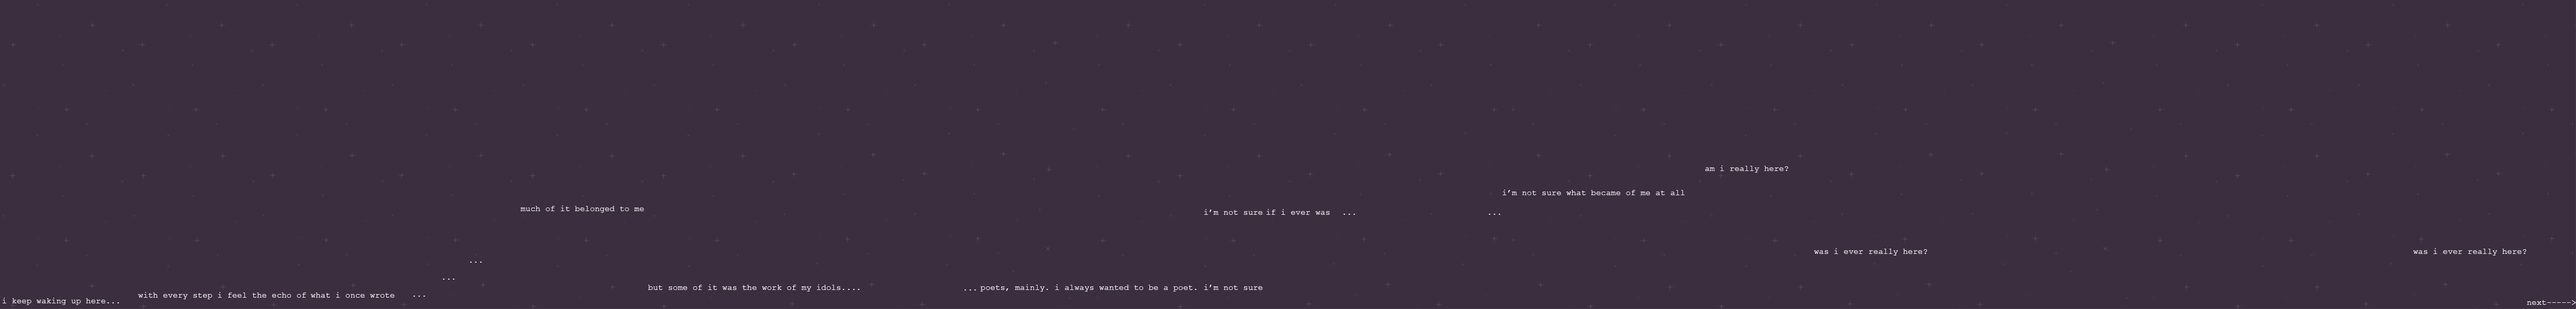
<style>
.page{position:relative;width:2576px;height:309px;background:#3a2e3f}
.page>*{position:absolute;margin:0}
.t1{font:8.2px "CourierNewPSMT";color:#ffffff}
</style>
<div class="page">
<p class="t1" style="left:1705px;top:165px;width:83px;height:8px">am i really here?</p>
<p class="t1" style="left:1502px;top:190px;width:183px;height:5px">i’m not sure what became of me at all</p>
<p class="t1" style="left:520px;top:206px;width:124px;height:7px">much of it belonged to me</p>
<p class="t1" style="left:1204px;top:209px;width:59px;height:6px">i’m not sure</p>
<p class="t1" style="left:1266px;top:209px;width:64px;height:6px">if i ever was</p>
<p class="t1" style="left:1344px;top:214px;width:11px;height:1px">...</p>
<p class="t1" style="left:1489px;top:214px;width:11px;height:1px">...</p>
<p class="t1" style="left:1814px;top:248px;width:113px;height:8px">was i ever really here?</p>
<p class="t1" style="left:2413px;top:248px;width:114px;height:8px">was i ever really here?</p>
<p class="t1" style="left:470px;top:262px;width:12px;height:1px">...</p>
<p class="t1" style="left:443px;top:279px;width:11px;height:1px">...</p>
<p class="t1" style="left:138px;top:292px;width:168px;height:7px">with every step i feel the echo of</p>
<p class="t1" style="left:311px;top:292px;width:84px;height:6px">what i once wrote</p>
<p class="t1" style="left:648px;top:284px;width:196px;height:8px">but some of it was the work of my idols.</p>
<p class="t1" style="left:848px;top:289px;width:12px;height:1px">...</p>
<p class="t1" style="left:964px;top:290px;width:12px;height:1px">...</p>
<p class="t1" style="left:980px;top:284px;width:217px;height:8px">poets, mainly. i always wanted to be a poet.</p>
<p class="t1" style="left:1204px;top:284px;width:59px;height:6px">i’m not sure</p>
<p class="t1" style="left:3px;top:298px;width:116px;height:7px">i keep waking up here...</p>
<p class="t1" style="left:413px;top:296px;width:12px;height:1px">...</p>
<p class="t1" style="left:2527px;top:300px;width:49px;height:5px">next-----&gt;</p>
</div>
